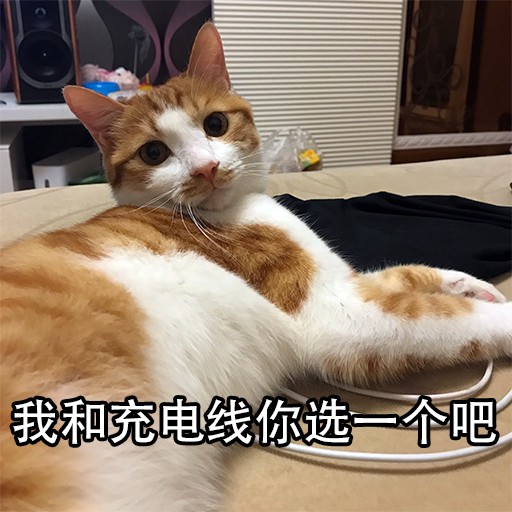
<style>
.page{position:relative;width:512px;height:512px}
.page>*{position:absolute;margin:0}
.t1{font:48.6px "AdobeHeitiStd-Regular";color:#ffffff}
</style>
<div class="page">
<p class="t1" style="left:13px;top:398px;width:483px;height:46px">我和充电线你选一个吧</p>
</div>
